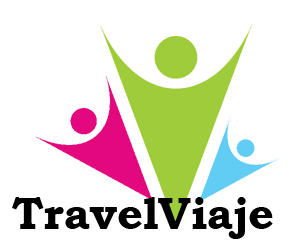
<style>
.page{position:relative;width:302px;height:250px;background:#ffffff}
.page>*{position:absolute;margin:0}
.t1{font:45px "BookmanOldStyle-Bold";color:#000000}
</style>
<div class="page">
<p class="t1" style="left:12px;top:197px;width:261px;height:42px">TravelViaje</p>
</div>
